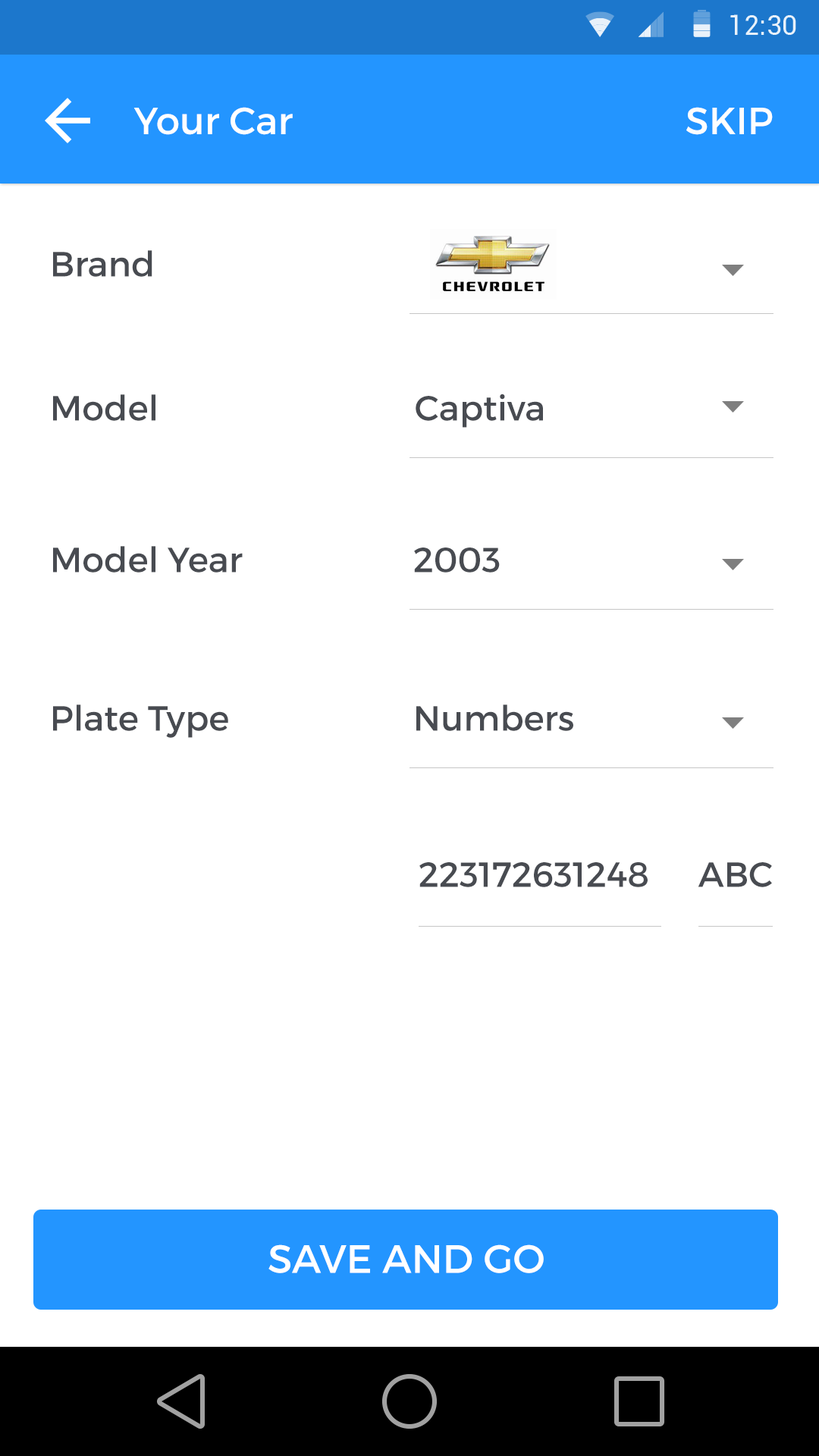
<style>
.page{position:relative;width:819px;height:1456px;background:#ffffff}
.page>*{position:absolute;margin:0}
.t1{font:37.9px "Montserrat-Regular";color:#ffffff}
.t2{font:37.9px "Montserrat-Regular";color:#fefefe}
.t3{font:34.9px "Montserrat-Regular";color:#484b51}
.t4{font:39.4px "Montserrat-Regular";color:#ffffff;text-transform:uppercase}
</style>
<div class="page">
<p class="t1" style="left:133px;top:107px;width:160px;height:28px">Your Car</p>
<p class="t2" style="left:686px;top:107px;width:87px;height:28px">SKIP</p>
<p class="t3" style="left:53px;top:250px;width:99px;height:27px">Brand</p>
<p class="t3" style="left:53px;top:394px;width:102px;height:27px">Model</p>
<p class="t3" style="left:416px;top:394px;width:127px;height:34px">Captiva</p>
<p class="t3" style="left:53px;top:546px;width:190px;height:27px">Model Year</p>
<p class="t3" style="left:414px;top:548px;width:86px;height:25px">2003</p>
<p class="t3" style="left:53px;top:704px;width:175px;height:34px">Plate Type</p>
<p class="t3" style="left:416px;top:704px;width:157px;height:27px">Numbers</p>
<p class="t3" style="left:419px;top:862px;width:229px;height:25px">223172631248</p>
<p class="t3" style="left:698px;top:862px;width:74px;height:25px">ABC</p>
<p class="t4" style="left:268px;top:1244px;width:276px;height:29px">SAVE AND GO</p>
</div>
